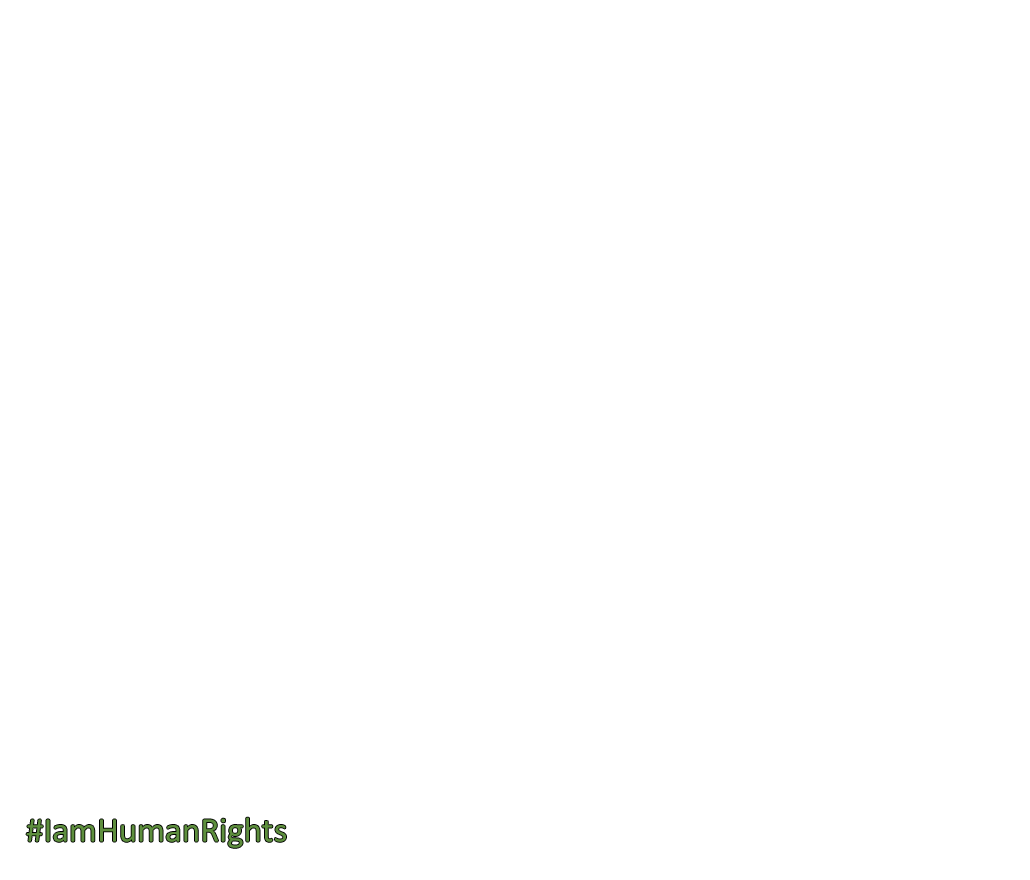
<style>
.page{position:relative;width:1030px;height:880px;background:#ffffff}
.page>*{position:absolute;margin:0}
.t1{font:35px "Calibri";color:#5e8f3e}
</style>
<div class="page">
<p class="t1" style="left:26px;top:817px;width:260px;height:31px">#IamHumanRights</p>
</div>
